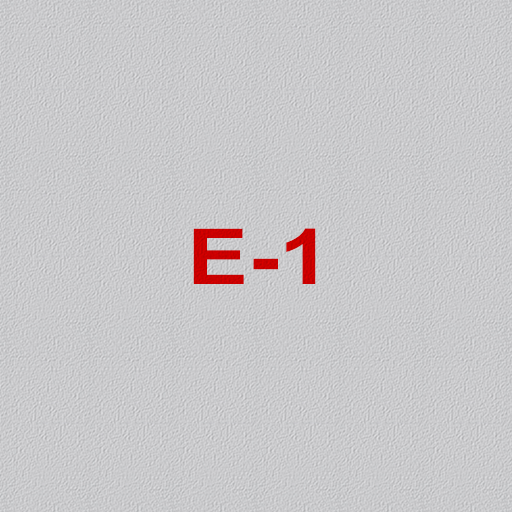
<style>
.page{position:relative;width:512px;height:512px}
.page>*{position:absolute;margin:0}
.t1{font:77px "Arial-BoldMT";color:#ca0000;scale:1.19 1}
</style>
<div class="page">
<p class="t1" style="left:193px;top:228px;width:123px;height:56px">Е-1</p>
</div>
